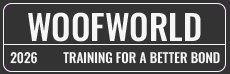
<style>
.page{position:relative;width:230px;height:74px;background:#333333}
.page>*{position:absolute;margin:0}
.t1{font:34.6px "Oswald-Medium";color:#f6f6f6}
.t2{font:13.3px "Oswald-Medium";color:#f6f6f6}
</style>
<div class="page">
<p class="t1" style="left:28px;top:12px;width:173px;height:30px">WOOFWORLD</p>
<p class="t2" style="left:10px;top:51px;width:27px;height:13px">2026</p>
<p class="t2" style="left:63px;top:52px;width:157px;height:12px">TRAINING FOR A BETTER BOND</p>
</div>
